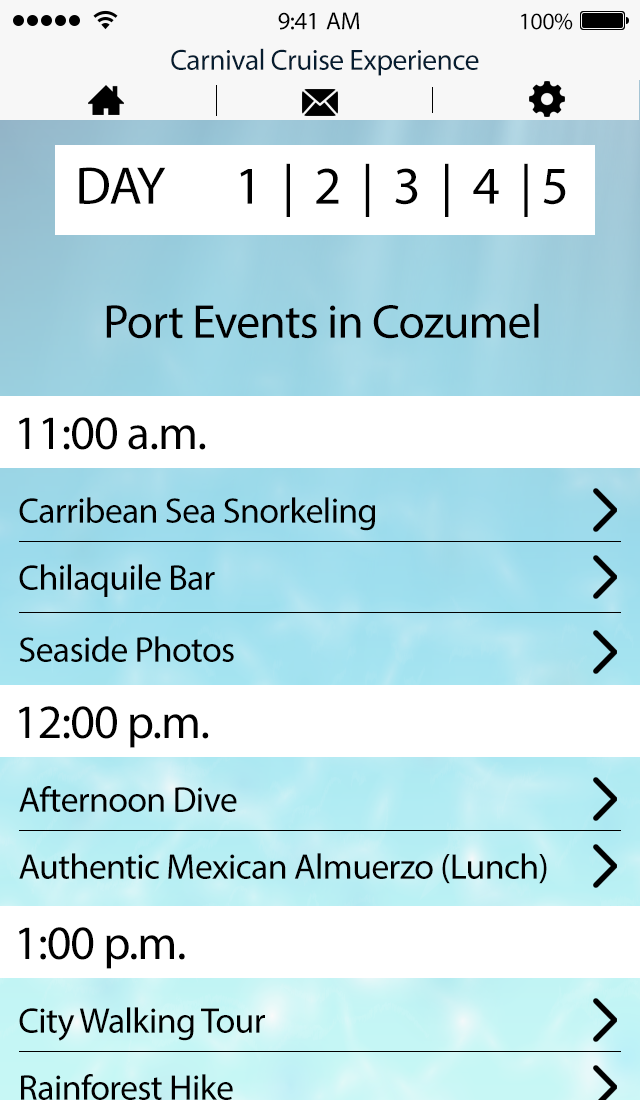
<style>
.page{position:relative;width:640px;height:1100px;background:#ffffff}
.page>*{position:absolute;margin:0}
.t1{font:25px "MyriadPro-Regular";letter-spacing:-0.02em;color:#000000}
.t2{font:24px "MyriadPro-Regular";letter-spacing:-0.02em;color:#000000}
.t3{font:29.4px "MyriadPro-Regular";letter-spacing:-0.02em;color:#061d30}
.t4{font:53.4px "MyriadPro-Regular";letter-spacing:-0.02em;color:#000000}
.t5{font:48px "MyriadPro-Regular";letter-spacing:-0.02em;color:#000000}
.t6{font:36px "MyriadPro-Regular";letter-spacing:-0.02em;color:#000000}
</style>
<div class="page">
<p class="t1" style="left:278px;top:12px;width:82px;height:18px">9:41 AM</p>
<p class="t2" style="left:521px;top:13px;width:52px;height:17px">100%</p>
<p class="t3" style="left:171px;top:48px;width:308px;height:28px">Carnival Cruise Experience</p>
<p class="t4" style="left:79px;top:163px;width:487px;height:54px">DAY 1  |  2  |  3  |  4  | 5</p>
<p class="t5" style="left:106px;top:303px;width:433px;height:36px">Port Events in Cozumel</p>
<p class="t5" style="left:19px;top:417px;width:187px;height:33px">11:00 a.m.</p>
<p class="t6" style="left:19px;top:497px;width:356px;height:34px">Carribean Sea Snorkeling</p>
<p class="t6" style="left:19px;top:564px;width:196px;height:33px">Chilaquile Bar</p>
<p class="t6" style="left:19px;top:636px;width:215px;height:26px">Seaside Photos</p>
<p class="t5" style="left:19px;top:706px;width:190px;height:42px">12:00 p.m.</p>
<p class="t6" style="left:19px;top:786px;width:218px;height:26px">Afternoon Dive</p>
<p class="t6" style="left:19px;top:853px;width:528px;height:31px">Authentic Mexican Almuerzo (Lunch)</p>
<p class="t5" style="left:19px;top:927px;width:166px;height:42px">1:00 p.m.</p>
<p class="t6" style="left:19px;top:1007px;width:246px;height:34px">City Walking Tour</p>
<p class="t6" style="left:21px;top:1074px;width:212px;height:26px">Rainforest Hike</p>
</div>
